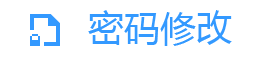
<style>
.page{position:relative;width:260px;height:60px;background:#ffffff}
.page>*{position:absolute;margin:0}
.t1{font:36px "MicrosoftYaHei";color:#3399ff}
</style>
<div class="page">
<p class="t1" style="left:88px;top:10px;width:144px;height:36px">密码修改</p>
</div>
